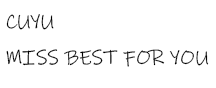
<style>
.page{position:relative;width:216px;height:88px;background:#ffffff}
.page>*{position:absolute;margin:0}
.t1{font:20.8px "InkFree";color:#000000}
</style>
<div class="page">
<p class="t1" style="left:6px;top:14px;width:203px;height:53px">CUYU<br>MISS BEST FOR YOU</p>
</div>
